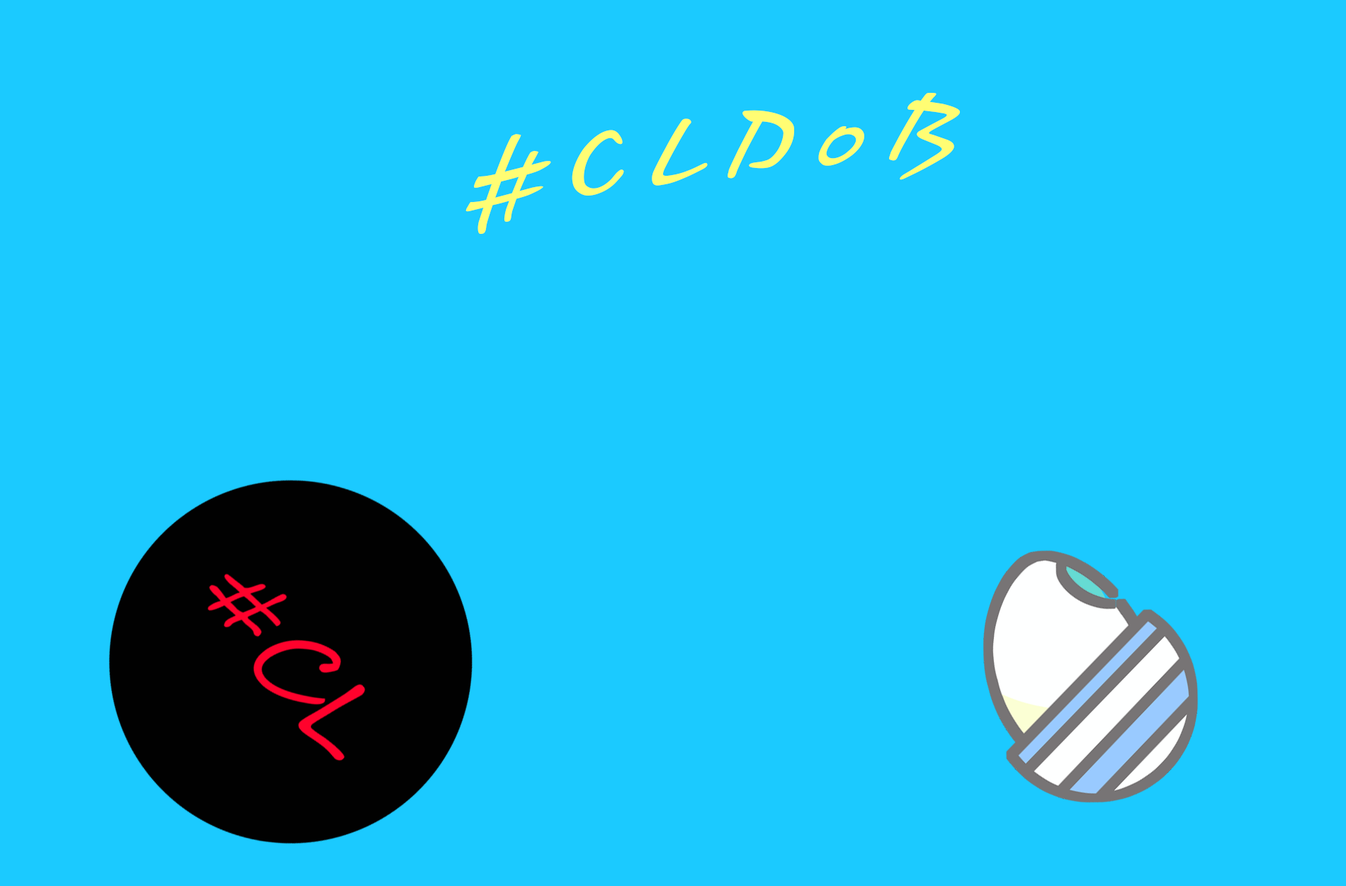
<style>
.page{position:relative;width:1346px;height:886px;background:#1bcaff}
.page>*{position:absolute;margin:0}
.t1{font:172.6px "HaanCjaM";color:#fffd73}
</style>
<div class="page">
<p class="t1" style="left:466px;top:93px;width:494px;height:141px">#CLDoB</p>
</div>
